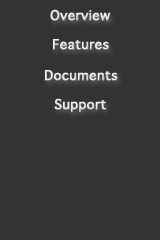
<style>
.page{position:relative;width:160px;height:240px;background:#333333}
.page>*{position:absolute;margin:0}
.t1{font:18px "AppleSymbols";color:#fbfbfb;font-weight:bold}
.t2{font:18px "AppleSymbols";font-weight:bold}
</style>
<div class="page">
<p class="t1" style="left:50px;top:9px;width:61px;height:12px">Overview</p>
<p class="t1" style="left:53px;top:39px;width:56px;height:11px">Features</p>
<p class="t2" style="left:45px;top:70px;width:73px;height:11px">Documents</p>
<p class="t1" style="left:54px;top:98px;width:52px;height:15px">Support</p>
</div>
